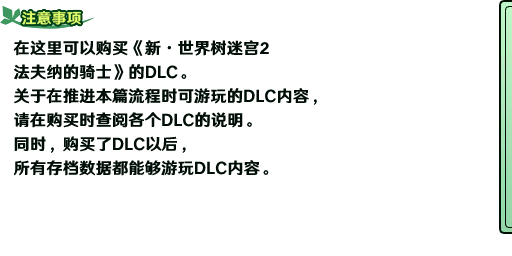
<style>
.page{position:relative;width:512px;height:256px;background:#ffffff}
.page>*{position:absolute;margin:0}
.t1{font:14.7px "HYWenHei-HEW";letter-spacing:0.025em;color:#dfff6c}
.t2{font:16px/24px "HYWenHei-HEW";letter-spacing:0.025em;color:#000e06}
</style>
<div class="page">
<p class="t1" style="left:22px;top:11px;width:59px;height:14px">注意事项</p>
<p class="t2" style="left:13px;top:40px;width:304px;height:136px">在这里可以购买《新·世界树迷宫2<br>法夫纳的骑士》的DLC。<br>关于在推进本篇流程时可游玩的DLC内容，请在购买时查阅各个DLC的说明。<br>同时，购买了DLC以后，<br>所有存档数据都能够游玩DLC内容。</p>
</div>
